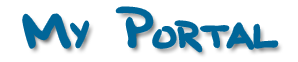
<style>
.page{position:relative;width:298px;height:62px;background:#ffffff}
.page>*{position:absolute;margin:0}
.t1{font:30px "BobbiesHand";color:#006699}
.t2{font:48px "BobbiesHand";color:#006699}
</style>
<div class="page">
<p class="t1" style="left:24px;top:8px;width:253px;height:43px"><span class="t2">M</span>Y<span class="t2"> P</span>ORTAL</p>
</div>
